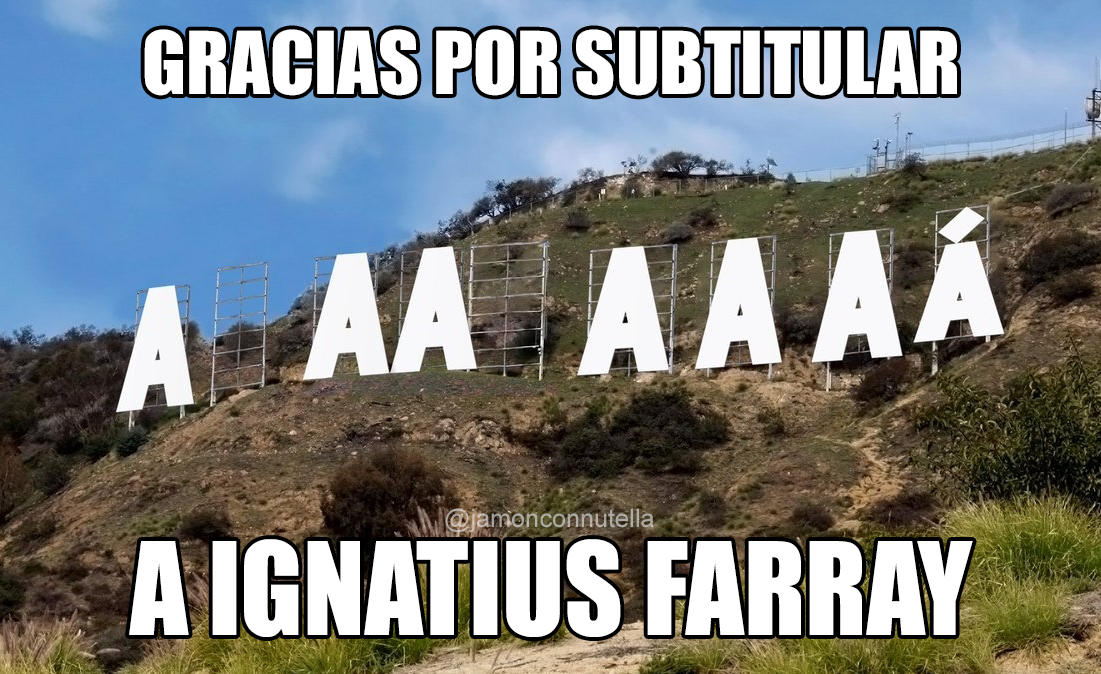
<style>
.page{position:relative;width:1101px;height:674px}
.page>*{position:absolute;margin:0}
.t1{font:80px "Impact";color:#ffffff}
.t2{font:25.3px "ArialMT";color:#afaba3}
.t3{font:118.8px "Impact";color:#ffffff;scale:0.96 1}
</style>
<div class="page">
<p class="t1" style="left:144px;top:29px;width:813px;height:67px">GRACIAS POR SUBTITULAR</p>
<p class="t2" style="left:445px;top:508px;width:209px;height:25px">@jamonconnutella</p>
<p class="t3" style="left:129px;top:539px;width:844px;height:98px">A IGNATIUS FARRAY</p>
</div>
